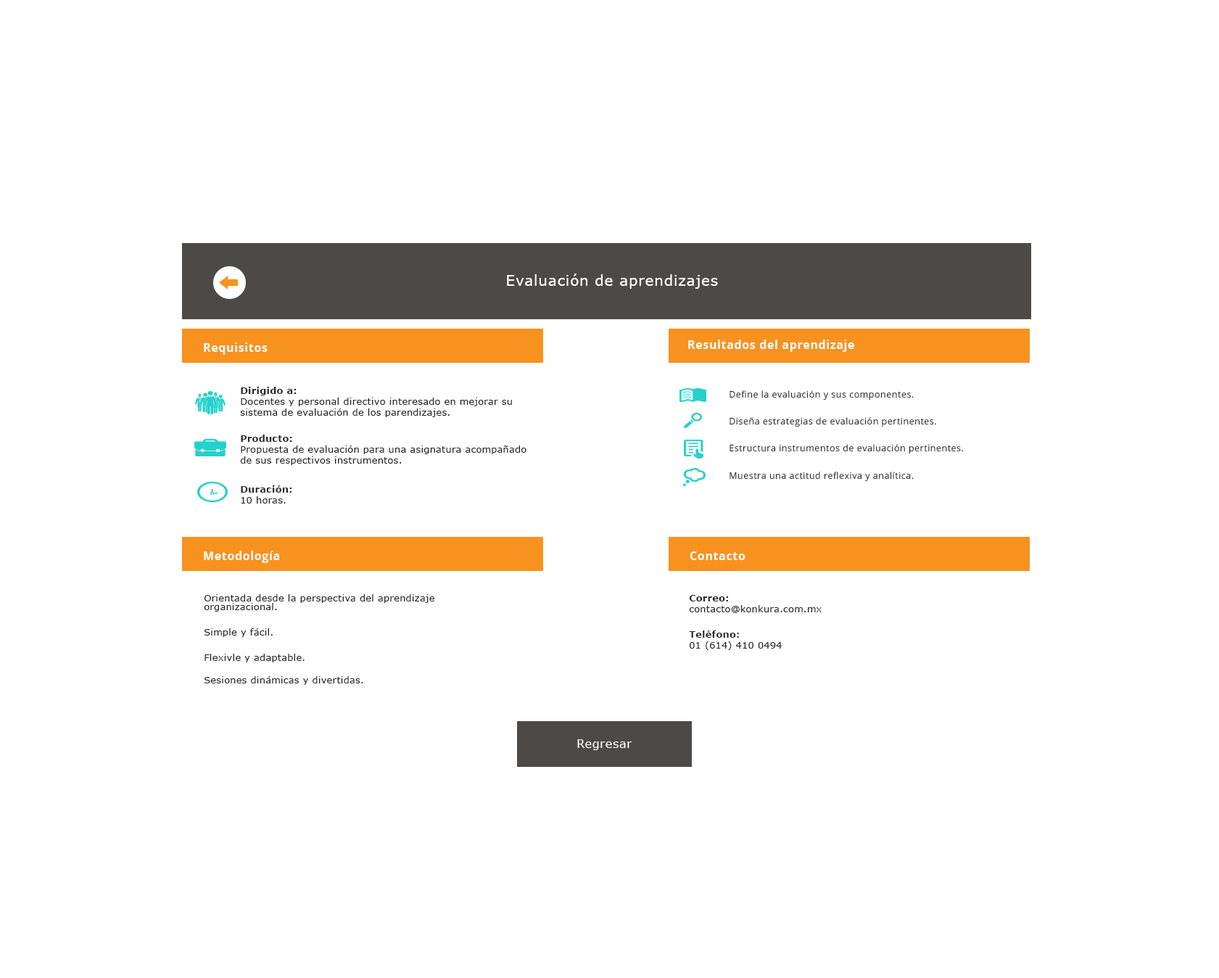
<style>
.page{position:relative;width:1219px;height:978px;background:#ffffff}
.page>*{position:absolute;margin:0}
.t1{font:14.5px "Verdana";letter-spacing:0.04em;color:#fefefe}
.t2{font:11.6px "OpenSans-Bold";letter-spacing:0.04em;color:#ffffff}
.t3{font:9px/11px "Verdana";letter-spacing:0.04em;color:#272727}
.t4{font:9px/9px "Verdana-Bold";letter-spacing:0.04em;color:#272727}
.t5{font:9px/9px "OpenSans";letter-spacing:0.04em;color:#272727}
.t6{font:9px/9px "Verdana";letter-spacing:0.04em;color:#272727}
.t7{font:9px "Verdana";letter-spacing:0.04em;color:#272727}
.t8{font:11.6px "Verdana";letter-spacing:0.04em;color:#ffffff}
</style>
<div class="page">
<p class="t1" style="left:507px;top:273px;width:211px;height:16px">Evaluación de aprendizajes</p>
<p class="t2" style="left:688px;top:339px;width:167px;height:13px">Resultados del aprendizaje</p>
<p class="t2" style="left:204px;top:342px;width:64px;height:13px">Requisitos</p>
<p class="t3" style="left:240px;top:387px;width:272px;height:30px"><span class="t4">Dirigido a:<br></span>Docentes y personal directivo interesado en mejorar su<br>sistema de evaluación de los parendizajes.</p>
<p class="t5" style="left:730px;top:390px;width:234px;height:92px">Define la evaluación y sus componentes.<br><br><br>Diseña estrategias de evaluación pertinentes.<br><br><br>Estructura instrumentos de evaluación pertinentes.<br><br><br>Muestra una actitud reflexiva y analítica.</p>
<p class="t3" style="left:240px;top:435px;width:287px;height:30px"><span class="t4">Producto:<br></span>Propuesta de evaluación para una asignatura acompañado<br>de sus respectivos instrumentos.</p>
<p class="t4" style="left:241px;top:485px;width:51px;height:18px">Duración:<br><span class="t3">10 horas.</span></p>
<p class="t2" style="left:204px;top:551px;width:75px;height:12px">Metodología</p>
<p class="t2" style="left:691px;top:551px;width:55px;height:9px">Contacto</p>
<p class="t6" style="left:204px;top:594px;width:231px;height:18px">Orientada desde la perspectiva del aprendizaje <br>organizacional.</p>
<p class="t3" style="left:689px;top:595px;width:133px;height:18px"><span class="t4">Correo:<br></span>contacto@konkura.com.mx</p>
<p class="t7" style="left:205px;top:628px;width:68px;height:9px">Simple y fácil.</p>
<p class="t3" style="left:689px;top:630px;width:93px;height:20px"><span class="t4">Teléfono:<br></span>01 (614) 410 0494</p>
<p class="t7" style="left:205px;top:654px;width:100px;height:8px">Flexivle y adaptable.</p>
<p class="t7" style="left:205px;top:676px;width:158px;height:9px">Sesiones dinámicas y divertidas.</p>
<p class="t8" style="left:577px;top:739px;width:56px;height:11px">Regresar</p>
</div>
